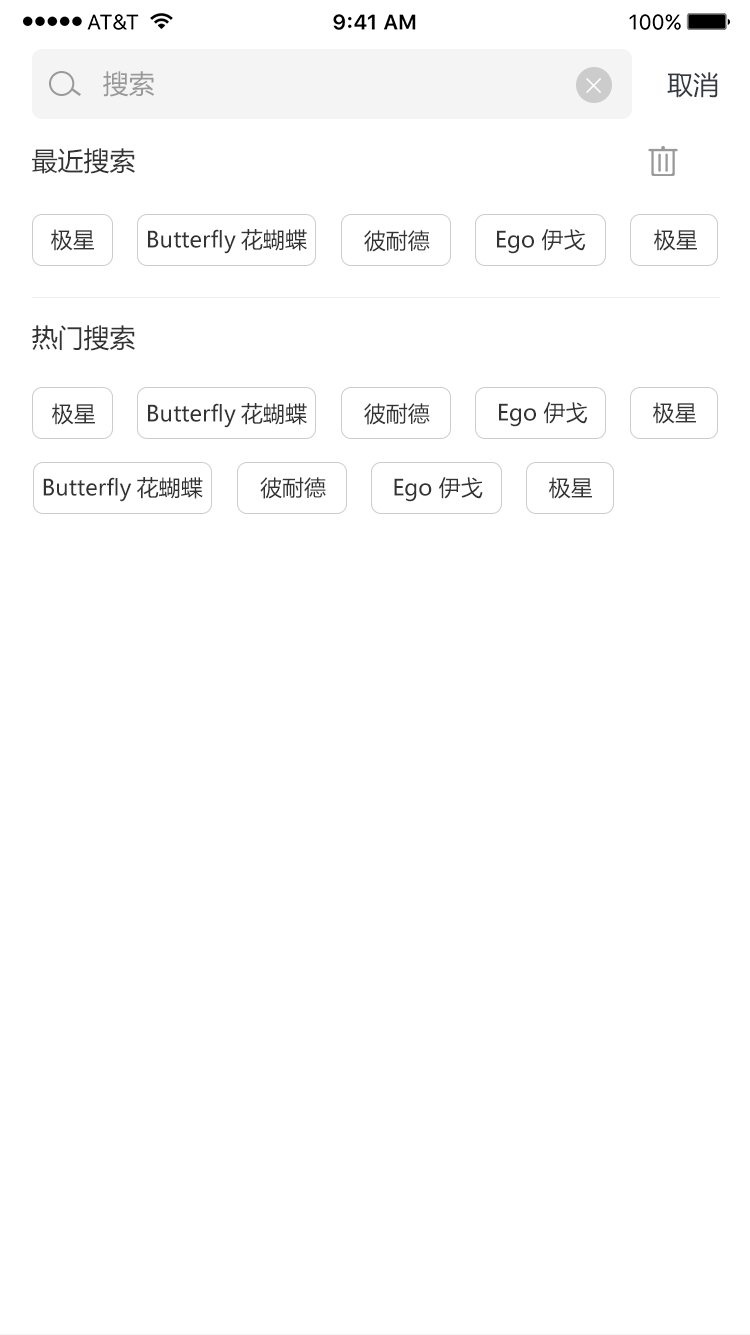
<style>
.page{position:relative;width:750px;height:1335px;background:#ffffff}
.page>*{position:absolute;margin:0}
.t1{font:26px "MicrosoftYaHei";color:#999999}
.t2{font:26px "MicrosoftYaHei";color:#343843}
.t3{font:26px "MicrosoftYaHei";color:#333333}
.t4{font:22px "MicrosoftYaHei";color:#333333}
</style>
<div class="page">
<p class="t1" style="left:103px;top:71px;width:52px;height:26px">搜索</p>
<p class="t2" style="left:667px;top:72px;width:51px;height:26px">取消</p>
<p class="t3" style="left:32px;top:148px;width:103px;height:26px">最近搜索</p>
<p class="t4" style="left:51px;top:229px;width:43px;height:22px">极星</p>
<p class="t4" style="left:148px;top:229px;width:159px;height:25px">Butterfly花蝴蝶</p>
<p class="t4" style="left:364px;top:230px;width:66px;height:22px">彼耐德</p>
<p class="t4" style="left:497px;top:229px;width:89px;height:25px">Ego 伊戈</p>
<p class="t4" style="left:654px;top:229px;width:43px;height:22px">极星</p>
<p class="t3" style="left:32px;top:325px;width:103px;height:26px">热门搜索</p>
<p class="t4" style="left:52px;top:403px;width:43px;height:22px">极星</p>
<p class="t4" style="left:148px;top:403px;width:159px;height:25px">Butterfly花蝴蝶</p>
<p class="t4" style="left:364px;top:403px;width:66px;height:22px">彼耐德</p>
<p class="t4" style="left:499px;top:402px;width:89px;height:25px">Ego 伊戈</p>
<p class="t4" style="left:653px;top:402px;width:43px;height:22px">极星</p>
<p class="t4" style="left:43px;top:477px;width:160px;height:25px">Butterfly花蝴蝶</p>
<p class="t4" style="left:260px;top:477px;width:66px;height:22px">彼耐德</p>
<p class="t4" style="left:394px;top:477px;width:89px;height:25px">Ego 伊戈</p>
<p class="t4" style="left:549px;top:477px;width:43px;height:22px">极星</p>
</div>
